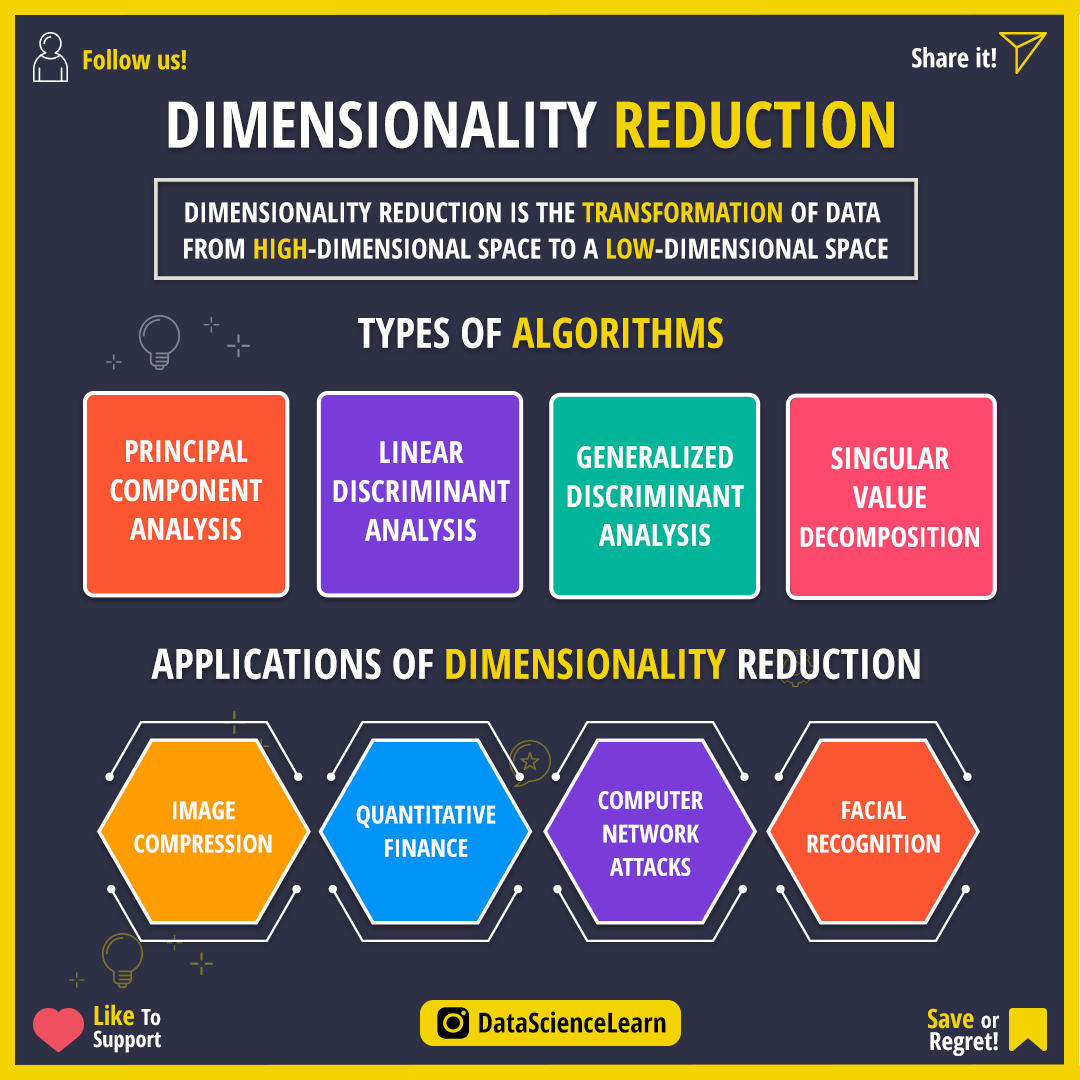
<style>
.page{position:relative;width:1080px;height:1080px;background:#2e3045}
.page>*{position:absolute;margin:0}
.t1{font:26.4px "OpenSans-CondensedBold";color:#f3d400}
.t2{font:26.4px "OpenSans-CondensedBold";color:#ffffff}
.t3{font:63.9px "OpenSans-CondensedBold";color:#fffffe}
.t4{font:63.9px "OpenSans-CondensedBold";color:#f3d400}
.t5{font:27.8px/36.1px "OpenSans-CondensedBold";color:#ffffff}
.t6{font:27.8px/36.1px "OpenSans-CondensedBold";color:#f3d400}
.t7{font:41.7px "OpenSans-CondensedBold";color:#f3d400}
.t8{font:41.7px "OpenSans-CondensedBold";color:#ffffff}
.t9{font:30.6px/38.9px "OpenSans-CondensedBold";color:#ffffff}
.t10{font:27.8px/38.9px "OpenSans-CondensedBold";color:#ffffff}
.t11{font:25px/33.3px "OpenSans-CondensedBold";color:#ffffff}
.t12{font:22.2px/22.2px "OpenSans-CondensedBold";color:#ffffff}
.t13{font:26.4px/22.2px "OpenSans-CondensedBold";color:#f3d400}
.t14{font:27.8px "OpenSans-CondensedBold";color:#000000}
.t15{font:25px/22.2px "OpenSans-CondensedBold";color:#ffffff}
</style>
<div class="page">
<p class="t1" style="left:83px;top:49px;width:103px;height:21px">Follow us!</p>
<p class="t2" style="left:912px;top:47px;width:84px;height:21px">Share it!</p>
<p class="t3" style="left:168px;top:101px;width:726px;height:48px">DIMENSIONALITY <span class="t4">REDUCTION</span></p>
<p class="t5" style="left:184px;top:202px;width:704px;height:57px;text-align:center">DIMENSIONALITY REDUCTION IS THE <span class="t6">TRANSFORMATION </span>OF DATA <br>FROM <span class="t6">HIGH</span>-DIMENSIONAL SPACE TO A <span class="t6">LOW</span>-DIMENSIONAL SPACE</p>
<p class="t7" style="left:358px;top:317px;width:365px;height:32px"><span class="t8">TYPES OF </span>ALGORITHMS</p>
<p class="t9" style="left:110px;top:440px;width:152px;height:100px;text-align:center">PRINCIPAL<br>COMPONENT<br>ANALYSIS</p>
<p class="t9" style="left:333px;top:441px;width:177px;height:100px;text-align:center">LINEAR<br>DISCRIMINANT<br>ANALYSIS</p>
<p class="t9" style="left:567px;top:446px;width:177px;height:100px;text-align:center">GENERALIZED<br>DISCRIMINANT<br>ANALYSIS</p>
<p class="t9" style="left:800px;top:447px;width:179px;height:100px;text-align:center">SINGULAR<br>VALUE<br><span class="t10">DECOMPOSITION</span></p>
<p class="t8" style="left:151px;top:648px;width:769px;height:32px">APPLICATIONS OF <span class="t7">DIMENSIONALITY</span> REDUCTION</p>
<p class="t11" style="left:598px;top:791px;width:106px;height:85px;text-align:center">COMPUTER<br>NETWORK<br>ATTACKS</p>
<p class="t11" style="left:134px;top:801px;width:138px;height:52px;text-align:center">IMAGE<br>COMPRESSION</p>
<p class="t11" style="left:356px;top:805px;width:140px;height:52px;text-align:center">QUANTITATIVE<br>FINANCE</p>
<p class="t11" style="left:807px;top:801px;width:133px;height:52px;text-align:center">FACIAL<br>RECOGNITION</p>
<p class="t12" style="left:93px;top:1004px;width:68px;height:49px"><span class="t13">Like </span>To<br>Support</p>
<p class="t14" style="left:479px;top:1011px;width:187px;height:22px">DataScienceLearn</p>
<p class="t15" style="left:928px;top:1008px;width:72px;height:48px;text-align:right"><span class="t13">Save </span><span class="t12">or<br></span>Regret!</p>
</div>
